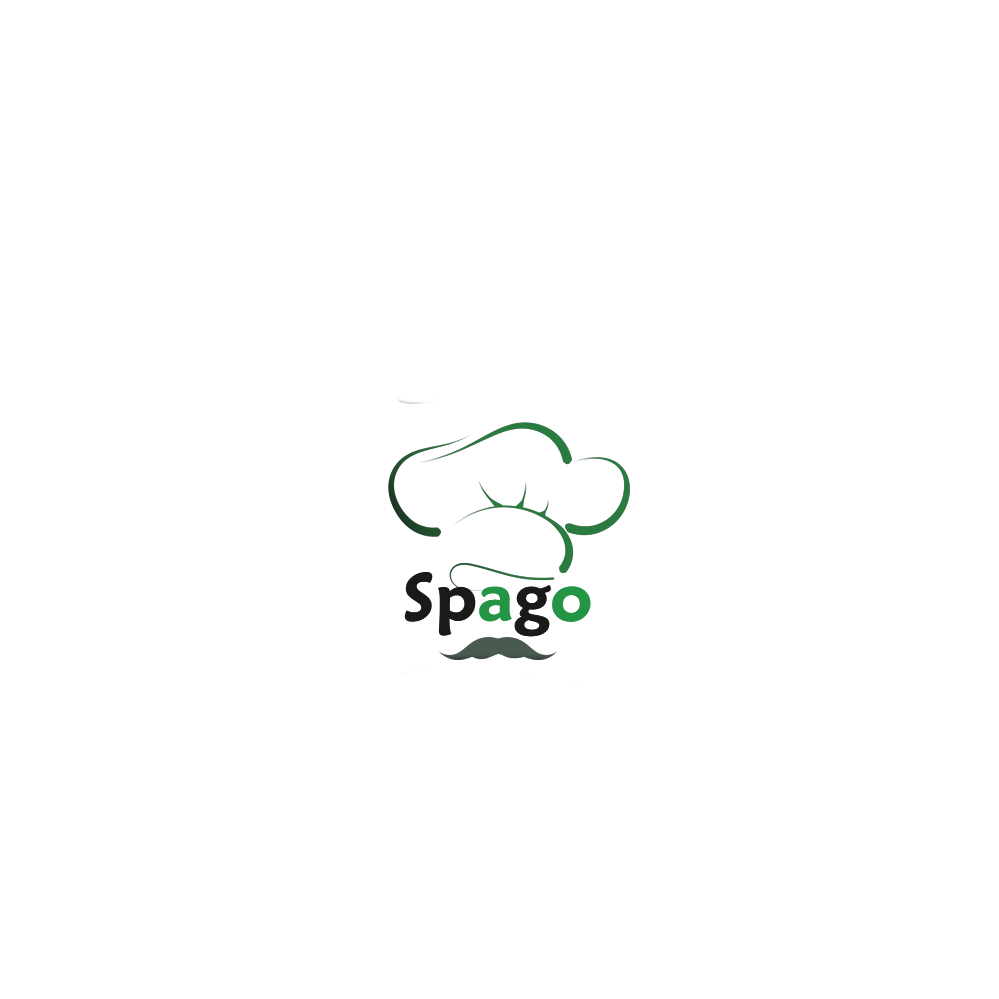
<style>
.page{position:relative;width:999px;height:999px;background:#ffffff}
.page>*{position:absolute;margin:0}
.t1{font:72px "AraJozoor-Regular";color:#1c1919}
.t2{font:72px "AraJozoor-Regular";color:#249544}
</style>
<div class="page">
<p class="t1" style="left:404px;top:572px;width:187px;height:65px">Sp<span class="t2">a</span>g<span class="t2">o</span></p>
</div>
